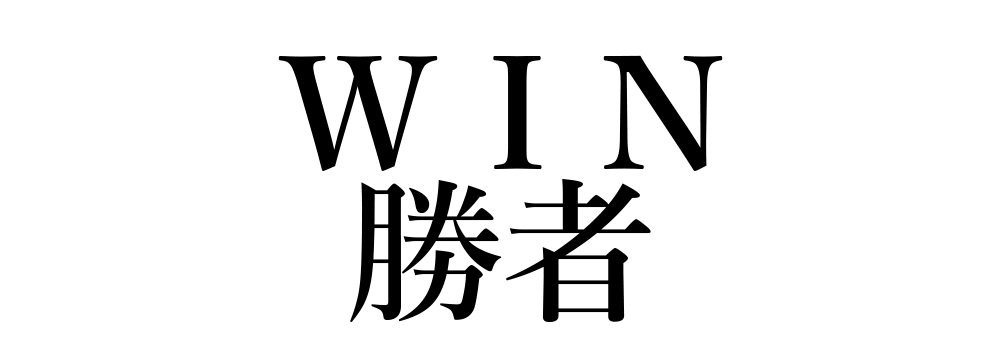
<style>
.page{position:relative;width:1000px;height:350px;background:#ffffff}
.page>*{position:absolute;margin:0}
.t1{font:155px "YuMincho-Demibold";color:#000000}
</style>
<div class="page">
<p class="t1" style="left:278px;top:55px;width:445px;height:116px">W I N</p>
<p class="t1" style="left:350px;top:179px;width:301px;height:143px">勝者</p>
</div>
